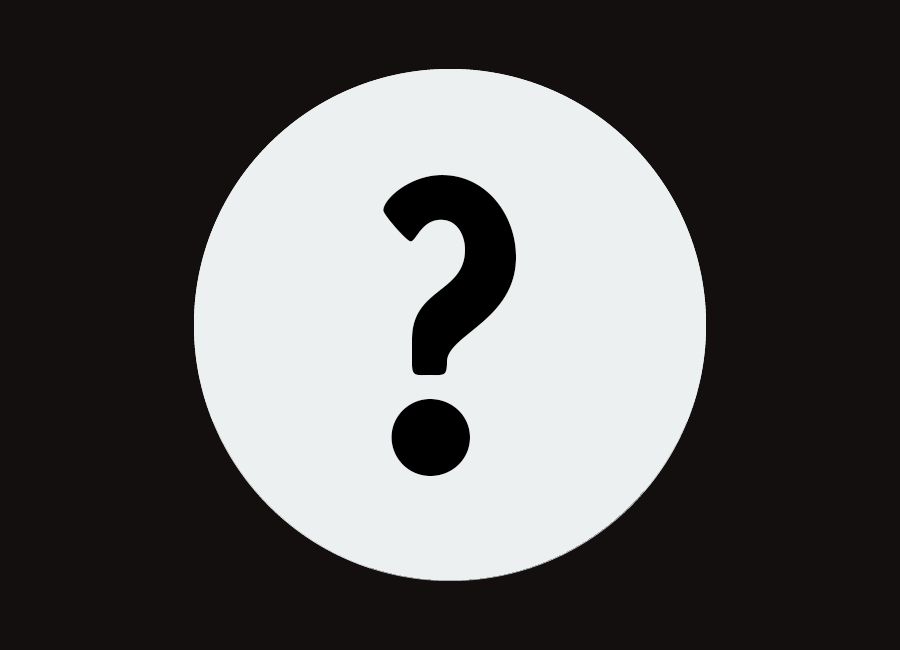
<style>
.page{position:relative;width:900px;height:650px;background:#130f0f}
.page>*{position:absolute;margin:0}
.t1{font:350px "HoboStd";color:#000000}
</style>
<div class="page">
<p class="t1" style="left:383px;top:175px;width:133px;height:301px">?</p>
</div>
